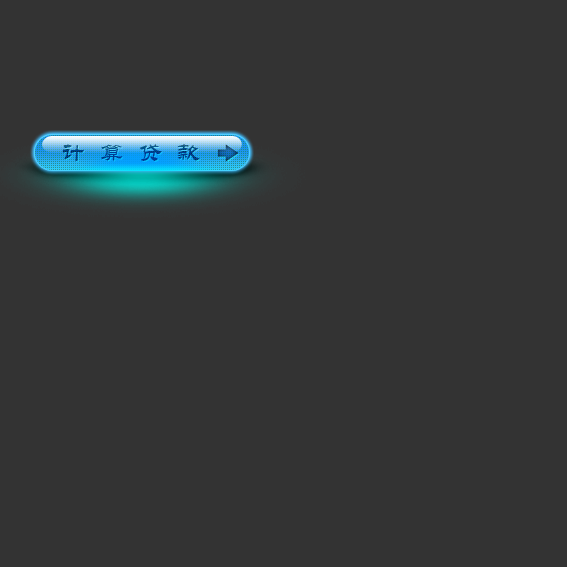
<style>
.page{position:relative;width:567px;height:567px;background:#333333}
.page>*{position:absolute;margin:0}
.t1{font:24px "STLiti";letter-spacing:0.6em}
</style>
<div class="page">
<p class="t1" style="left:62px;top:144px;width:138px;height:17px">计算贷款</p>
</div>
